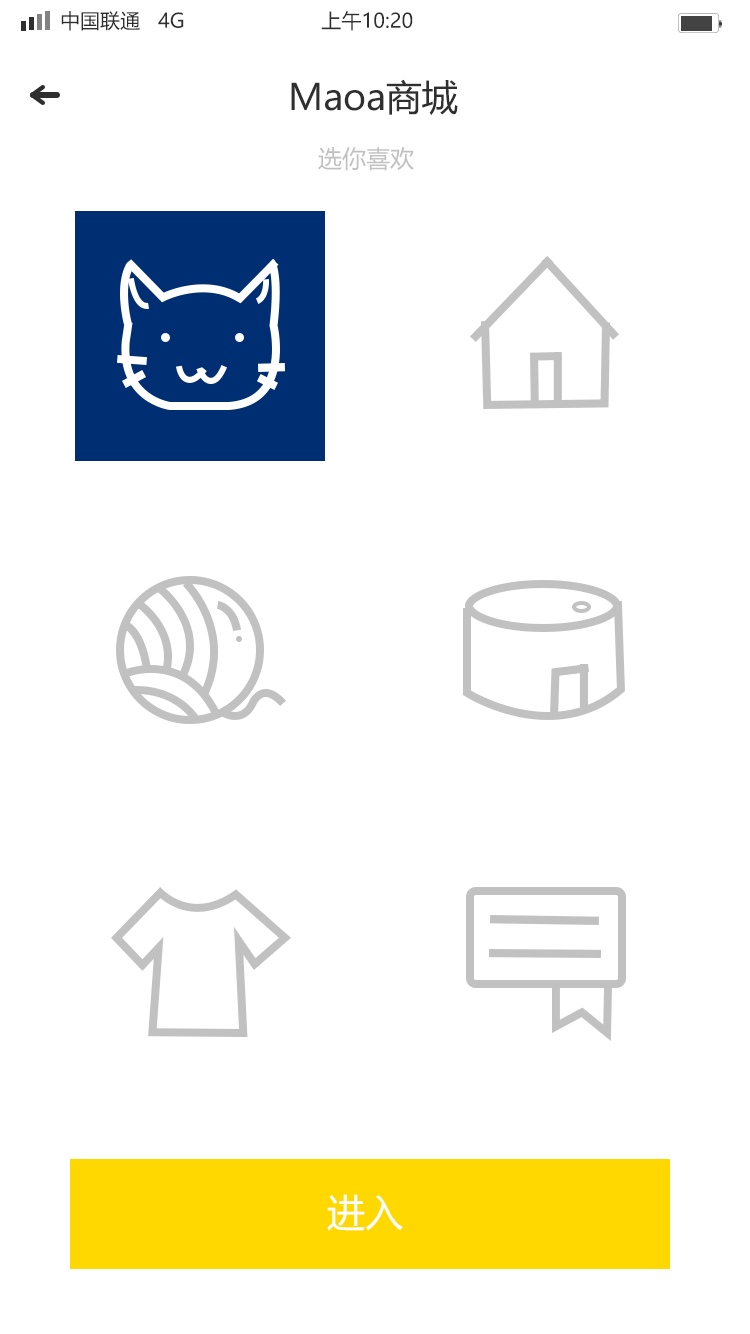
<style>
.page{position:relative;width:750px;height:1334px;background:#ffffff}
.page>*{position:absolute;margin:0}
.t1{font:20px "MicrosoftYaHei";color:#2f2f2f}
.t2{font:36px "MicrosoftYaHei";color:#2f2f2f}
.t3{font:24px "MicrosoftYaHei";color:#c1c1c1}
.t4{font:38px "MicrosoftYaHei";color:#ffffff}
</style>
<div class="page">
<p class="t1" style="left:61px;top:11px;width:352px;height:20px">中国联通   4G                       上午10:20</p>
<p class="t2" style="left:291px;top:79px;width:167px;height:36px">Maoa商城</p>
<p class="t3" style="left:318px;top:147px;width:96px;height:24px">选你喜欢</p>
<p class="t4" style="left:327px;top:1194px;width:76px;height:37px">进入</p>
</div>
